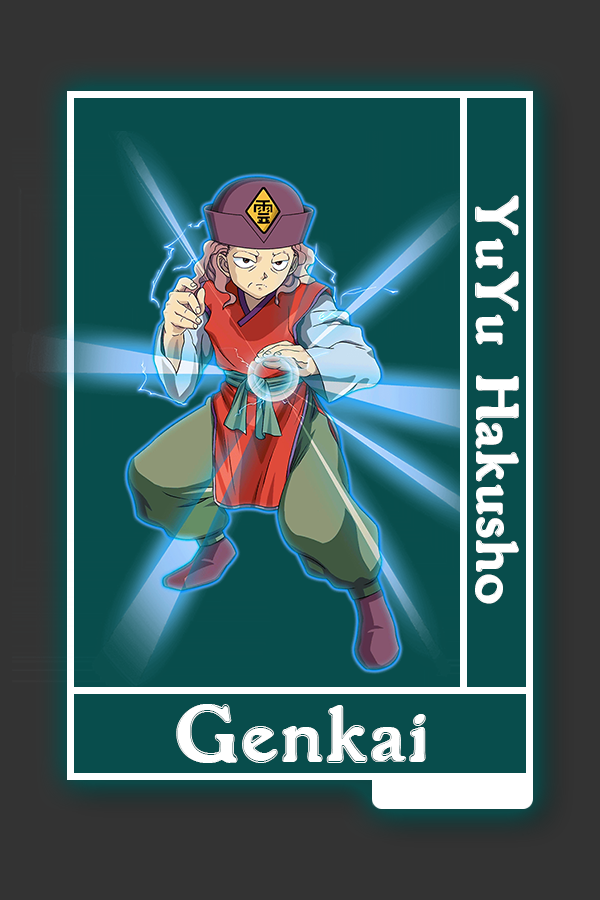
<style>
.page{position:relative;width:600px;height:900px;background:#084d4c}
.page>*{position:absolute;margin:0}
.t1{font:55.2px "GranthamOutline";color:#ffffff}
.t2{font:75px "GranthamOutline";color:#ffffff}
</style>
<div class="page">
<p class="t1" style="left:475px;top:195px;width:44px;height:409px;rotate:90deg">YuYu Hakusho</p>
<p class="t2" style="left:176px;top:704px;width:250px;height:59px">Genkai</p>
</div>
